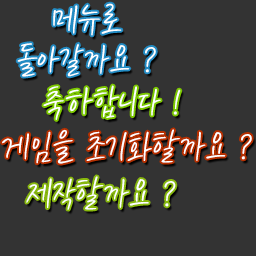
<style>
.page{position:relative;width:256px;height:256px;background:#333333}
.page>*{position:absolute;margin:0}
.t1{font:41.3px/40px "KCC-eunyoung-Regular";color:#ffffff}
.t2{font:41.3px "KCC-eunyoung-Regular";color:#ffffff}
</style>
<div class="page">
<p class="t1" style="left:17px;top:3px;width:139px;height:74px;text-align:center">메뉴로<br>돌아갈까요 ?</p>
<p class="t2" style="left:43px;top:85px;width:138px;height:35px">축하합니다 !</p>
<p class="t2" style="left:2px;top:129px;width:250px;height:35px">게임을 초기화할까요 ?</p>
<p class="t2" style="left:26px;top:176px;width:150px;height:34px">제작할까요 ?</p>
</div>
